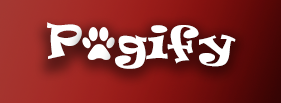
<style>
.page{position:relative;width:281px;height:103px}
.page>*{position:absolute;margin:0}
.t1{font:41.7px/291.7px "Ravie";color:#ffffff}
.t2{font:41.7px "Ravie";color:#ffffff}
</style>
<div class="page">
<p class="t1" style="left:47px;top:22px;width:35px;height:37px;text-align:center">P<br>P</p>
<p class="t2" style="left:115px;top:25px;width:121px;height:44px">gify</p>
</div>
